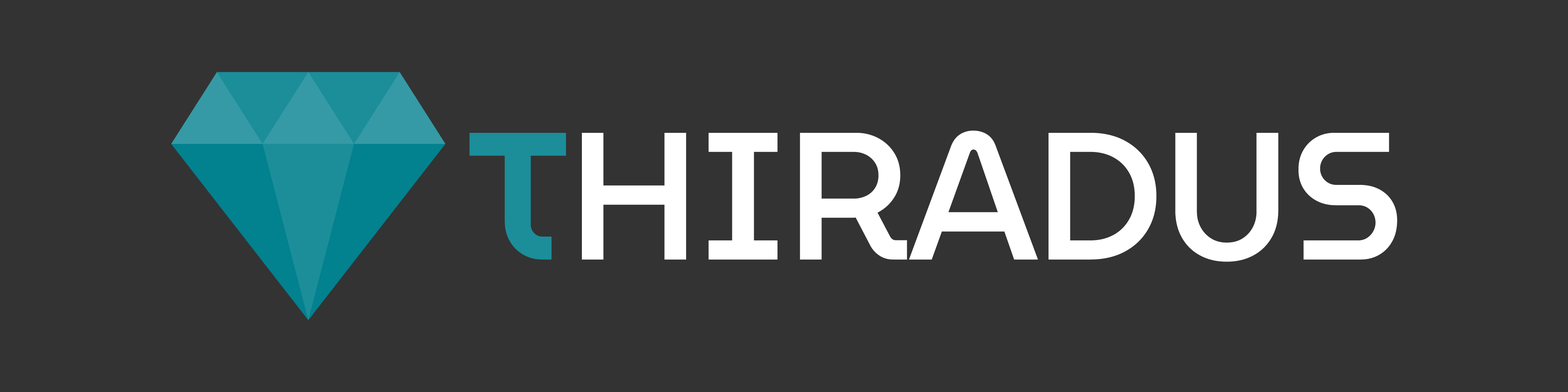
<style>
.page{position:relative;width:1568px;height:392px;background:#333333}
.page>*{position:absolute;margin:0}
.t1{font:258.4px "MuseoModerno-Medium";color:#ffffff;font-variant:small-caps}
.t2{font:258.4px "MuseoModerno-SemiBold";color:#1b8e9a;font-variant:small-caps}
</style>
<div class="page">
<p class="t1" style="left:469px;top:131px;width:928px;height:131px"><span class="t2">t</span>hiradus</p>
</div>
